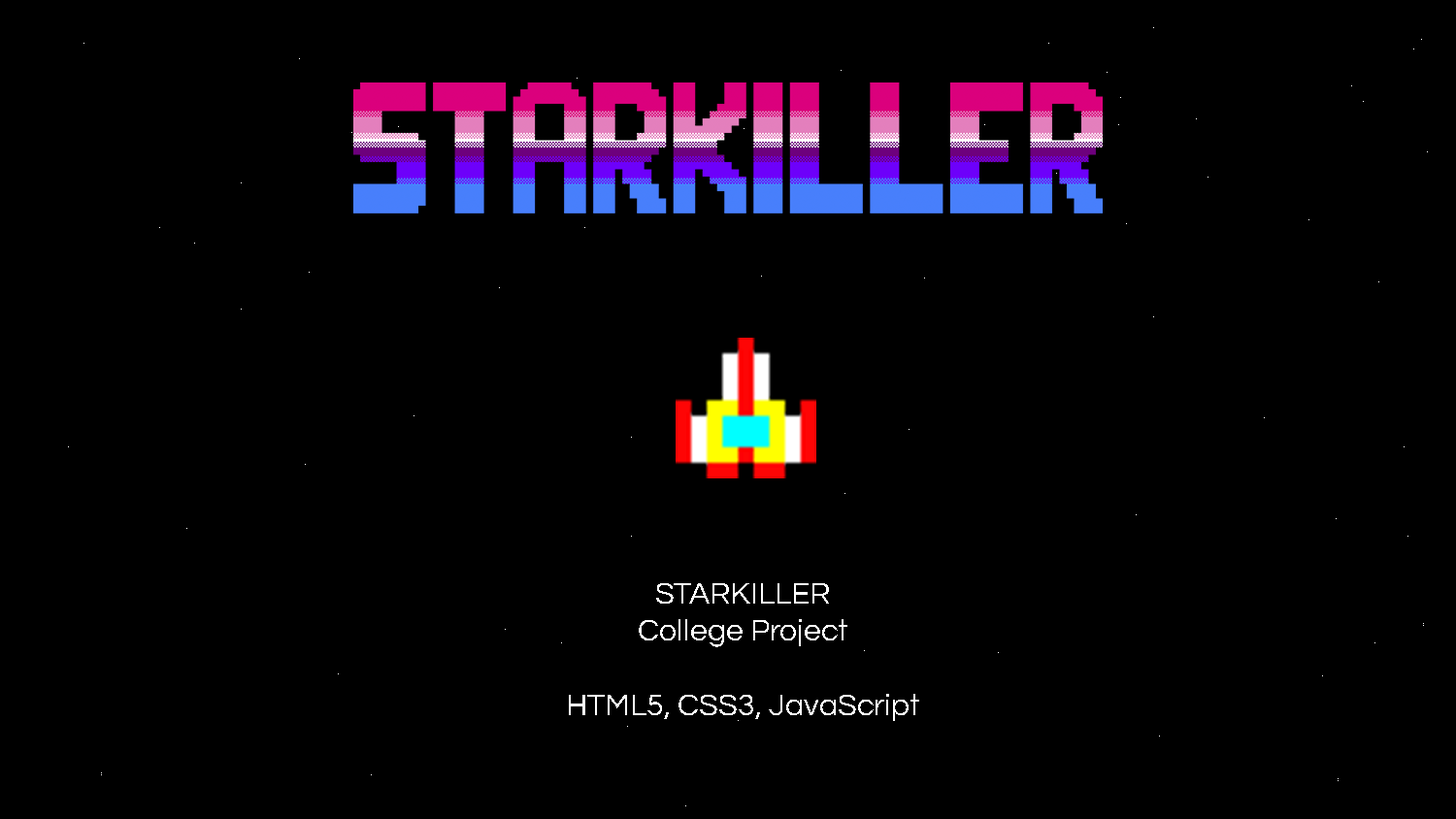
<style>
.page{position:relative;width:1456px;height:819px;background:#000000}
.page>*{position:absolute;margin:0}
.t1{font:31.1px "Questrial-Regular";color:#ffffff}
</style>
<div class="page">
<p class="t1" style="left:569px;top:583px;width:350px;height:138px;text-align:center">STARKILLER<br>College Project<br><br>HTML5, CSS3, JavaScript</p>
</div>
